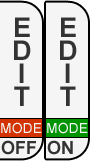
<style>
.page{position:relative;width:90px;height:161px;background:#f5f5f5}
.page>*{position:absolute;margin:0}
.t1{font:27px/11px "Arial-BoldMT";color:#333333}
.t2{font:14px "ArialMT";color:#f5f5f5}
.t3{font:18px "Arial-BoldMT";color:#333333}
</style>
<div class="page">
<p class="t1" style="left:14px;top:17px;width:17px;height:89px;text-align:center">E<br>D<br>I<br>T</p>
<p class="t1" style="left:60px;top:17px;width:17px;height:89px;text-align:center">E<br>D<br>I<br>T</p>
<p class="t2" style="left:1px;top:122px;width:41px;height:12px">MODE</p>
<p class="t2" style="left:47px;top:122px;width:41px;height:12px">MODE</p>
<p class="t3" style="left:1px;top:140px;width:35px;height:15px">OFF</p>
<p class="t3" style="left:47px;top:140px;width:26px;height:15px">ON</p>
</div>
